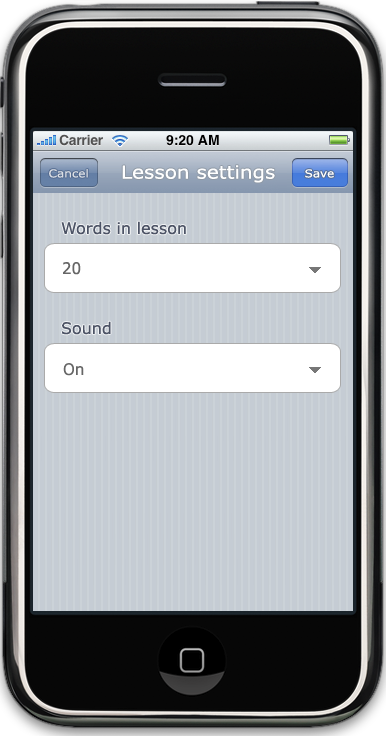
<style>
.page{position:relative;width:386px;height:742px}
.page>*{position:absolute;margin:0}
.t1{font:11px "Verdana";color:#dbdfe5;scale:1.1 1}
.t2{font:18px "Verdana";color:#ffffff;scale:1.11 1}
.t3{font:11px "Verdana";color:#ffffff;scale:1.1 1}
.t4{font:16px "Verdana";color:#4c5365}
.t5{font:16px "Verdana";color:#666666;scale:0.94 1}
</style>
<div class="page">
<p class="t1" style="left:49px;top:169px;width:39px;height:9px">Cancel</p>
<p class="t2" style="left:122px;top:165px;width:153px;height:18px">Lesson settings</p>
<p class="t3" style="left:305px;top:169px;width:29px;height:9px">Save</p>
<p class="t4" style="left:61px;top:221px;width:125px;height:14px">Words in lesson</p>
<p class="t5" style="left:63px;top:262px;width:18px;height:13px">20</p>
<p class="t4" style="left:62px;top:321px;width:49px;height:14px">Sound</p>
<p class="t5" style="left:63px;top:363px;width:21px;height:13px">On</p>
</div>
